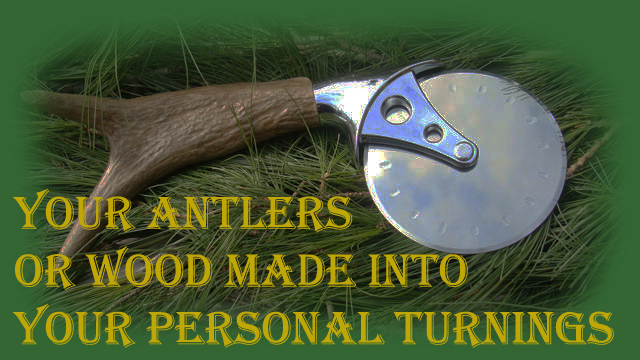
<style>
.page{position:relative;width:640px;height:360px}
.page>*{position:absolute;margin:0}
.t1{font:48px "Algerian";color:#bea706}
</style>
<div class="page">
<p class="t1" style="left:12px;top:188px;width:602px;height:160px">Your antlers <br>or wood made into <br>your personal turnings</p>
</div>
